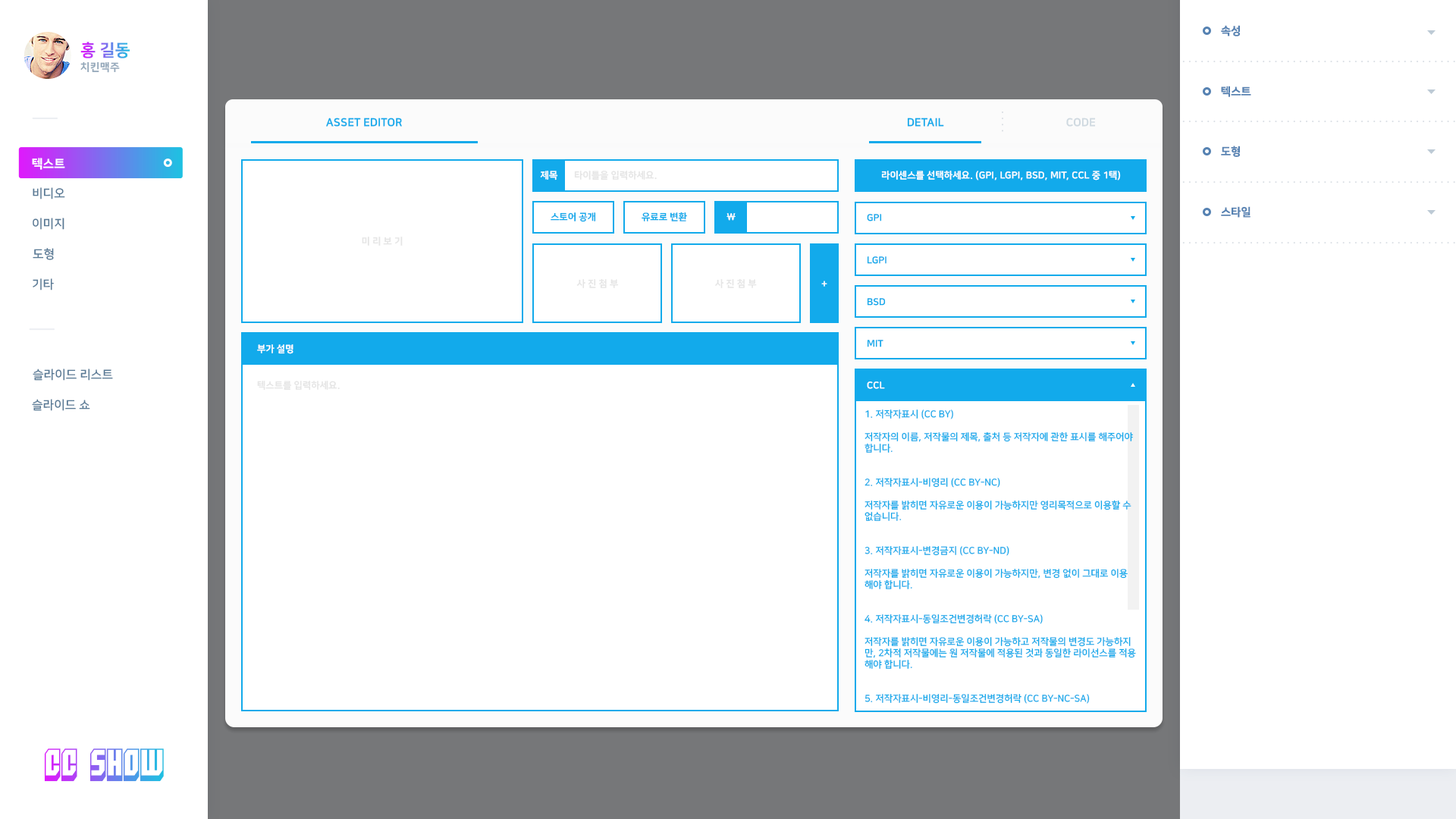
<style>
.page{position:relative;width:1456px;height:819px;background:#ffffff}
.page>*{position:absolute;margin:0}
.t1{font:11.1px "NanumSquareEB";color:#5682b2}
.t2{font:16.7px "NanumSquareEB";text-transform:uppercase}
.t3{font:10.6px "NanumSquareEB";letter-spacing:0.025em;color:#94a8ba;text-transform:uppercase}
.t4{font:11.1px "NanumSquareEB";color:#12aaeb;text-transform:uppercase}
.t5{font:11.1px "NanumSquareEB";color:#cfd9e0;text-transform:uppercase}
.t6{font:12.1px "NanumSquareEB";color:#ffffff;text-transform:uppercase}
.t7{font:9.5px "NanumSquareEB";color:#ffffff;text-transform:uppercase}
.t8{font:9.5px "NanumSquareEB";color:#e5e5e5;text-transform:uppercase}
.t9{font:12.1px "NanumSquareB";color:#597a96;text-transform:uppercase}
.t10{font:9.5px "NanumSquareEB";color:#12aaeb;text-transform:uppercase}
.t11{font:9.5px "NanumSquareB";color:#12aaeb;text-transform:uppercase}
.t12{font:31.6px "Blockt"}
</style>
<div class="page">
<p class="t1" style="left:1221px;top:25px;width:19px;height:11px">속성</p>
<p class="t2" style="left:80px;top:42px;width:50px;height:16px">홍 길동</p>
<p class="t3" style="left:80px;top:61px;width:40px;height:12px">치킨맥주</p>
<p class="t1" style="left:1221px;top:86px;width:30px;height:11px">텍스트</p>
<p class="t4" style="left:326px;top:118px;width:76px;height:9px">Asset EDITOR</p>
<p class="t4" style="left:907px;top:118px;width:37px;height:9px">DETAIL</p>
<p class="t5" style="left:1066px;top:118px;width:30px;height:9px">CODE</p>
<p class="t1" style="left:1221px;top:146px;width:19px;height:11px">도형</p>
<p class="t6" style="left:32px;top:158px;width:33px;height:12px">텍스트</p>
<p class="t7" style="left:540px;top:171px;width:18px;height:9px">제목</p>
<p class="t8" style="left:574px;top:171px;width:83px;height:9px">타이틀을 입력하세요.</p>
<p class="t7" style="left:881px;top:171px;width:240px;height:9px">라이센스를 선택하세요. (GPI, LGPI, BSD, MIT, CCL 중 1택)</p>
<p class="t9" style="left:33px;top:187px;width:32px;height:12px">비디오</p>
<p class="t1" style="left:1221px;top:206px;width:29px;height:12px">스타일</p>
<p class="t9" style="left:33px;top:218px;width:31px;height:12px">이미지</p>
<p class="t10" style="left:551px;top:212px;width:45px;height:10px">스토어 공개</p>
<p class="t10" style="left:642px;top:212px;width:45px;height:9px">유료로 변환</p>
<p class="t7" style="left:726px;top:213px;width:10px;height:8px">\</p>
<p class="t10" style="left:867px;top:214px;width:15px;height:7px">GPI</p>
<p class="t8" style="left:362px;top:237px;width:41px;height:9px">미 리 보 기</p>
<p class="t9" style="left:33px;top:248px;width:21px;height:12px">도형</p>
<p class="t10" style="left:867px;top:256px;width:19px;height:8px">LGPI</p>
<p class="t9" style="left:33px;top:278px;width:21px;height:12px">기타</p>
<p class="t8" style="left:576px;top:278px;width:43px;height:10px">사 진 첨 부</p>
<p class="t8" style="left:715px;top:278px;width:42px;height:10px">사 진 첨 부</p>
<p class="t7" style="left:821px;top:281px;width:6px;height:6px">+</p>
<p class="t10" style="left:867px;top:298px;width:19px;height:8px">BSD</p>
<p class="t10" style="left:867px;top:340px;width:16px;height:7px">MIT</p>
<p class="t7" style="left:257px;top:344px;width:36px;height:10px">부가 설명</p>
<p class="t9" style="left:33px;top:369px;width:80px;height:12px">슬라이드 리스트</p>
<p class="t8" style="left:257px;top:381px;width:83px;height:10px">텍스트를 입력하세요.</p>
<p class="t7" style="left:867px;top:381px;width:18px;height:8px">CCL</p>
<p class="t9" style="left:32px;top:399px;width:58px;height:12px">슬라이드 쇼</p>
<p class="t11" style="left:864px;top:409px;width:272px;height:295px">1. 저작자표시 (CC BY)<br><br>저작자의 이름, 저작물의 제목, 출처 등 저작자에 관한 표시를 해주어야<br>합니다.<br><br><br>2. 저작자표시-비영리 (CC BY-NC)<br><br>저작자를 밝히면 자유로운 이용이 가능하지만 영리목적으로 이용할 수<br>없습니다.<br><br><br>3. 저작자표시-변경금지 (CC BY-ND)<br><br>저작자를 밝히면 자유로운 이용이 가능하지만, 변경 없이 그대로 이용<br>해야 합니다.<br><br><br>4. 저작자표시-동일조건변경허락 (CC BY-SA)<br><br>저작자를 밝히면 자유로운 이용이 가능하고 저작물의 변경도 가능하지<br>만, 2차적 저작물에는 원 저작물에 적용된 것과 동일한 라이선스를 적용<br>해야 합니다.<br><br><br>5. 저작자표시-비영리-동일조건변경허락 (CC BY-NC-SA)</p>
<p class="t12" style="left:44px;top:748px;width:120px;height:34px">CC SHOW</p>
</div>
